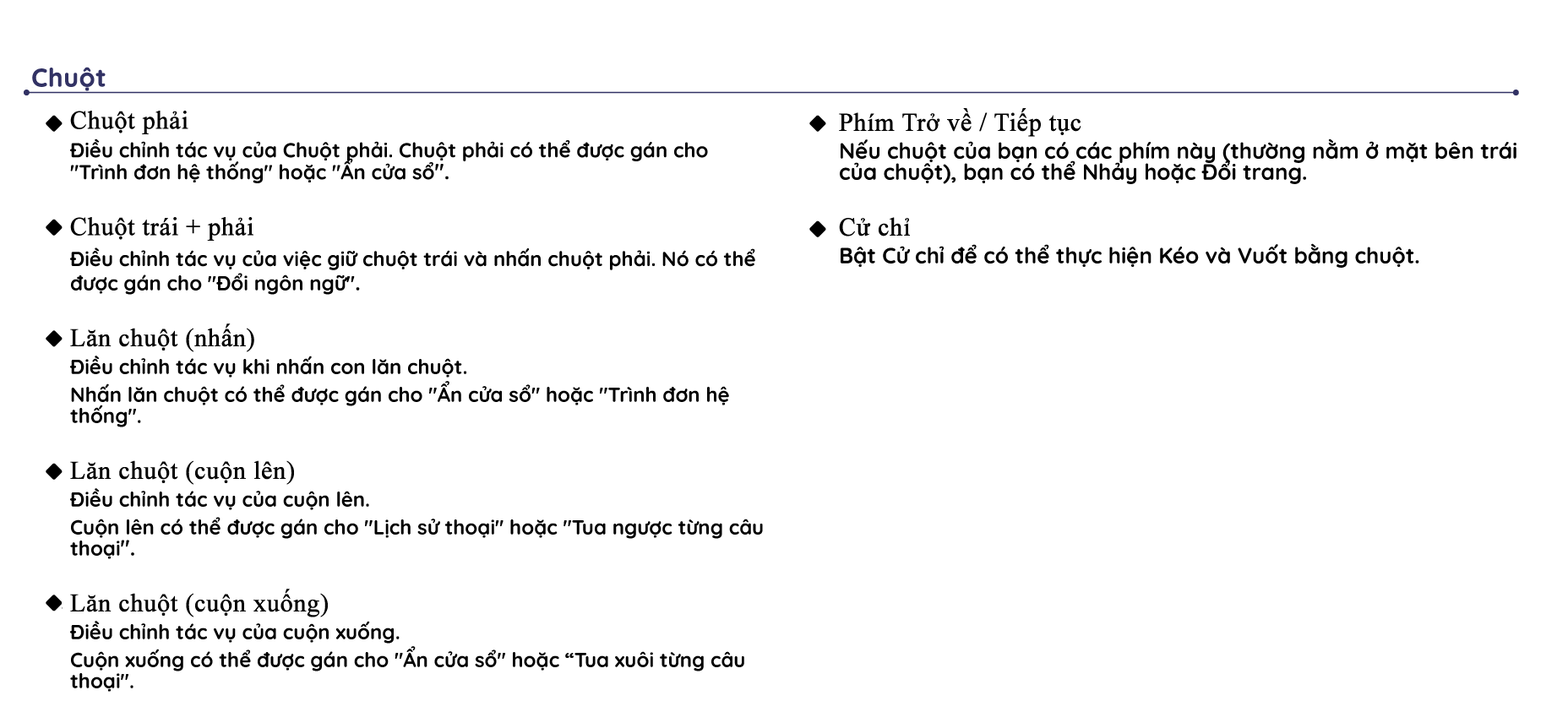
<style>
.page{position:relative;width:1568px;height:701px;background:#ffffff}
.page>*{position:absolute;margin:0}
.t1{font:25.3px "Quicksand-Bold";color:#323264;font-weight:bold}
.t2{font:20.3px/21.1px "Quicksand-Bold";color:#000000}
.t3{font:25.3px/21.1px "TimesNewRomanPSMT";color:#000000;font-weight:bold}
.t4{font:20.3px/22px "Quicksand-Bold";color:#000000}
.t5{font:20.3px/0px "Quicksand-Bold";color:#000000}
.t6{font:22px/22px "Quicksand-Bold";color:#000000}
.t7{font:20.3px "Quicksand-Bold";color:#000000}
.t8{font:22px/21.1px "Quicksand-Bold";color:#000000}
</style>
<div class="page">
<p class="t1" style="left:32px;top:67px;width:74px;height:24px">Chuột</p>
<p class="t2" style="left:70px;top:111px;width:693px;height:581px"><span class="t3">Chuột phải<br></span><span class="t4">Đi</span><span class="t5">ều chỉnh tác vụ của Chuột phải. Chuột phải có thể được gán cho "Trình </span><span class="t4">đơn hệ thống" hoặc "Ẩn cửa sổ</span><span class="t6">".<br><br></span><span class="t3">Chuột trái + phải<br></span><span class="t7">Điều chỉnh tác vụ của việc giữ chuột trái và nhấn chuột phải. Nó có thể được gán cho "Đổi ngôn ngữ"</span><span class="t8">.<br><br></span><span class="t3">Lăn chuột (nhấn)<br></span>Điều chỉnh tác vụ khi nhấn con lăn chuột.<br>Nhấn lăn chuột có thể được gán cho "Ẩn cửa sổ" hoặc "Trình đơn hệ thống".<br><br><span class="t3">Lăn chuột (cuộn lên)<br></span>Điều chỉnh tác vụ của cuộn lên.<br>Cuộn lên có thể được gán cho "Lịch sử thoại" hoặc "Tua ngược từng câu thoại<span class="t8">".<br><br></span><span class="t3">Lăn chuột (cuộn xuống)<br></span>Điều chỉnh tác vụ của cuộn xuống.<br>Cuộn xuống có thể được gán cho "Ẩn cửa sổ" hoặc “Tua xuôi từng câu thoại".</p>
<p class="t8" style="left:839px;top:108px;width:677px;height:160px"><span class="t3">Phím Trở về / Tiếp tục<br></span>Nếu chuột của bạn có các phím này (thường nằm ở mặt bên trái của chuột), bạn có thể Nhảy hoặc Đổi trang.<br><br><span class="t3">Cử chỉ<br></span>Bật Cử chỉ để có thể thực hiện Kéo và Vuốt bằng chuột.</p>
</div>
